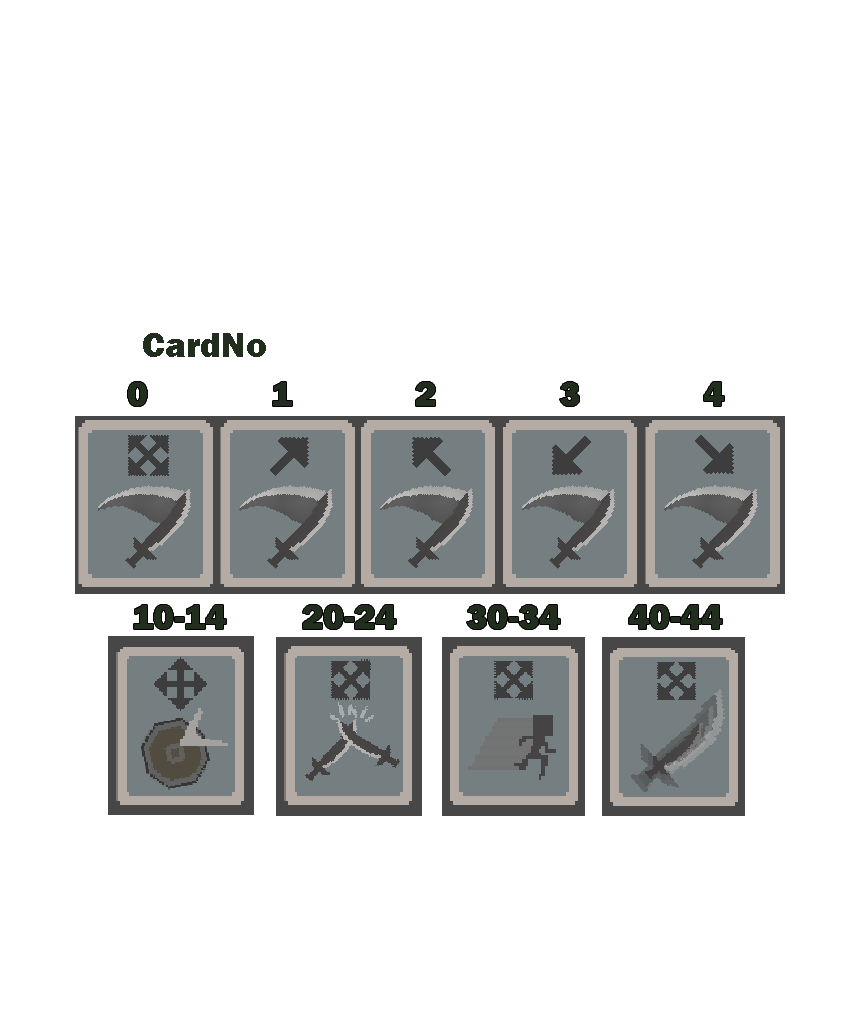
<style>
.page{position:relative;width:849px;height:1020px;background:#ffffff}
.page>*{position:absolute;margin:0}
.t1{font:36px "FranklinGothic-Heavy";color:#212e1d}
</style>
<div class="page">
<p class="t1" style="left:143px;top:333px;width:123px;height:24px">CardNo</p>
<p class="t1" style="left:128px;top:382px;width:596px;height:24px">0    1    2    3    4</p>
<p class="t1" style="left:134px;top:605px;width:92px;height:24px">10-14</p>
<p class="t1" style="left:303px;top:605px;width:93px;height:24px">20-24</p>
<p class="t1" style="left:467px;top:605px;width:93px;height:24px">30-34</p>
<p class="t1" style="left:629px;top:605px;width:93px;height:24px">40-44</p>
</div>
